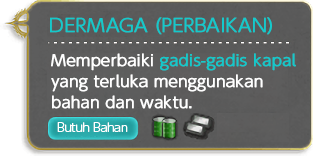
<style>
.page{position:relative;width:313px;height:156px}
.page>*{position:absolute;margin:0}
.t1{font:18px "UDShinGoPro-Light";color:#14c9cb;font-weight:bold}
.t2{font:15px/40px "UDShinGoPro-Light";color:#ffffff;font-weight:bold}
.t3{font:15px/40px "UDShinGoPro-Light";color:#14c9cb;font-weight:bold}
.t4{font:12px "UDShinGoPro-Light";letter-spacing:-0.04em;color:#ffffff}
</style>
<div class="page">
<p class="t1" style="left:50px;top:17px;width:222px;height:18px">DERMAGA (PERBAIKAN)</p>
<p class="t2" style="left:51px;top:53px;width:245px;height:56px">Memperbaiki <span class="t3">gadis-gadis kapal<br></span>yang terluka menggunakan<br>bahan dan waktu.</p>
<p class="t4" style="left:57px;top:122px;width:71px;height:10px">Butuh Bahan</p>
</div>
